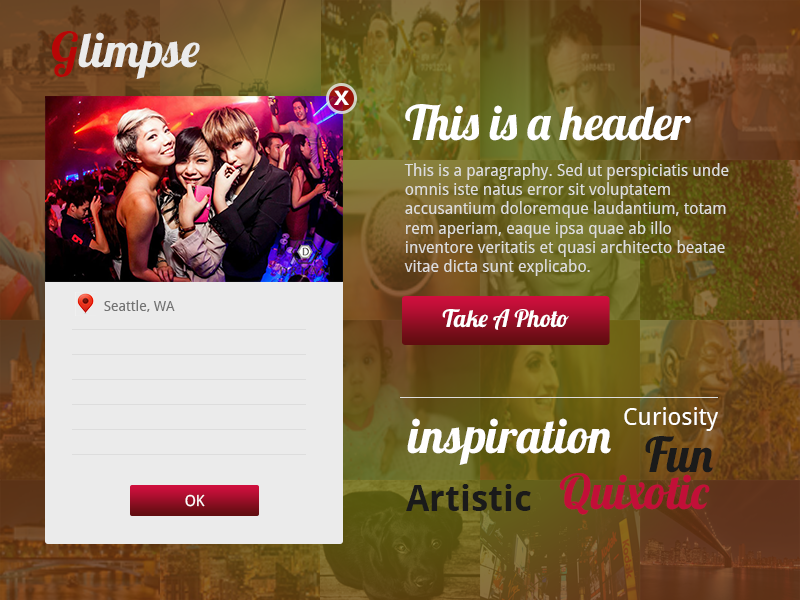
<style>
.page{position:relative;width:800px;height:600px}
.page>*{position:absolute;margin:0}
.t1{font:48px "Lobster";color:#ebebeb}
.t2{font:48px "Lobster";color:#b80606}
.t3{font:20.1px "DroidSans-Bold";color:#ffffff;scale:1.19 1}
.t4{font:48px "Lobster";color:#ffffff}
.t5{font:16px "DroidSans";color:#dddddd}
.t6{font:14px "DroidSans";color:#737373}
.t7{font:24px "Lobster";color:#ffffff}
.t8{font:24px "DroidSans";color:#ffffff}
.t9{font:48px "Lobster";color:#fffefe}
.t10{font:48px "Lobster";color:#1a1a1a}
.t11{font:48px "Lobster";color:#c20f38}
.t12{font:36px "DroidSans-Bold";color:#1a1a1a}
.t13{font:15.2px "DroidSans";color:#ffffff}
</style>
<div class="page">
<p class="t1" style="left:52px;top:31px;width:148px;height:48px"><span class="t2">G</span>limpse</p>
<p class="t3" style="left:334px;top:90px;width:15px;height:15px">X</p>
<p class="t4" style="left:405px;top:104px;width:286px;height:37px">This is a header</p>
<p class="t5" style="left:404px;top:163px;width:325px;height:113px">This is a paragraphy. Sed ut perspiciatis unde omnis iste natus error sit voluptatem accusantium doloremque laudantium, totam rem aperiam, eaque ipsa quae ab illo inventore veritatis et quasi architecto beatae vitae dicta sunt explicabo.</p>
<p class="t6" style="left:104px;top:300px;width:71px;height:12px">Seattle, WA</p>
<p class="t7" style="left:442px;top:309px;width:127px;height:21px">Take A Photo</p>
<p class="t8" style="left:624px;top:407px;width:94px;height:24px">Curiosity</p>
<p class="t9" style="left:407px;top:418px;width:204px;height:47px">inspiration</p>
<p class="t10" style="left:645px;top:436px;width:68px;height:37px">Fun</p>
<p class="t11" style="left:559px;top:473px;width:151px;height:42px">Quixotic</p>
<p class="t12" style="left:406px;top:484px;width:125px;height:27px">Artistic</p>
<p class="t13" style="left:185px;top:494px;width:20px;height:13px">OK</p>
</div>
